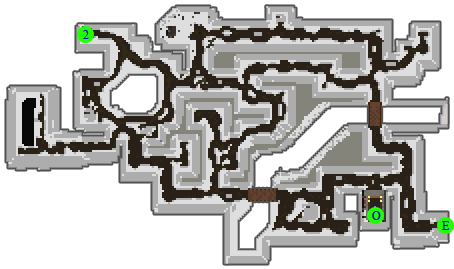
<style>
.page{position:relative;width:454px;height:269px;background:#ffffff}
.page>*{position:absolute;margin:0}
.t1{font:20px "TimesNewRomanPSMT";color:#0101dd}
</style>
<div class="page">
<p class="t1" style="left:83px;top:30px;width:6px;height:9px">2</p>
<p class="t1" style="left:372px;top:211px;width:9px;height:9px">O</p>
<p class="t1" style="left:442px;top:221px;width:8px;height:9px">E</p>
</div>
